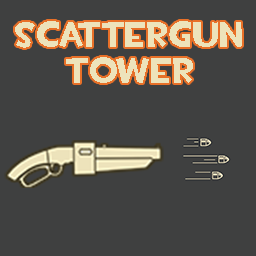
<style>
.page{position:relative;width:256px;height:256px;background:#3f4040}
.page>*{position:absolute;margin:0}
.t1{font:36px/36px "TF2Build";color:#ede3bb}
</style>
<div class="page">
<p class="t1" style="left:15px;top:21px;width:227px;height:62px;text-align:center">ScatterGun<br>Tower</p>
</div>
